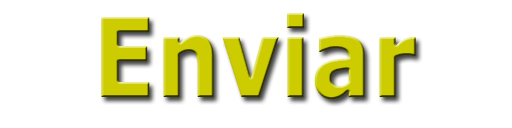
<style>
.page{position:relative;width:512px;height:128px;background:#ffffff}
.page>*{position:absolute;margin:0}
.t1{font:109.7px "Verdana-Bold";color:#cccc00;scale:0.83 1}
</style>
<div class="page">
<p class="t1" style="left:101px;top:13px;width:315px;height:86px">Enviar</p>
</div>
